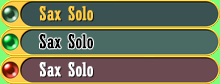
<style>
.page{position:relative;width:220px;height:84px}
.page>*{position:absolute;margin:0}
.t1{font:18.7px "Rockwell-Condensed";color:#ffce42;font-weight:bold}
.t2{font:18.7px "Rockwell-Condensed";color:#000000;font-weight:bold}
.t3{font:18.7px "Rockwell-Condensed";color:#ffffff;font-weight:bold}
</style>
<div class="page">
<p class="t1" style="left:39px;top:6px;width:54px;height:15px">Sax Solo</p>
<p class="t2" style="left:39px;top:34px;width:54px;height:15px">Sax Solo</p>
<p class="t3" style="left:39px;top:62px;width:54px;height:15px">Sax Solo</p>
</div>
